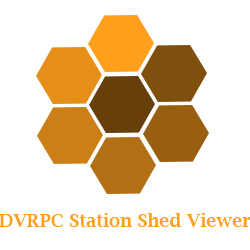
<style>
.page{position:relative;width:250px;height:250px;background:#ffffff}
.page>*{position:absolute;margin:0}
.t1{font:18px "LucidaBright-Demi";color:#ff9f1c}
</style>
<div class="page">
<p class="t1" style="left:0px;top:213px;width:251px;height:14px">DVRPC Station Shed Viewer</p>
</div>
